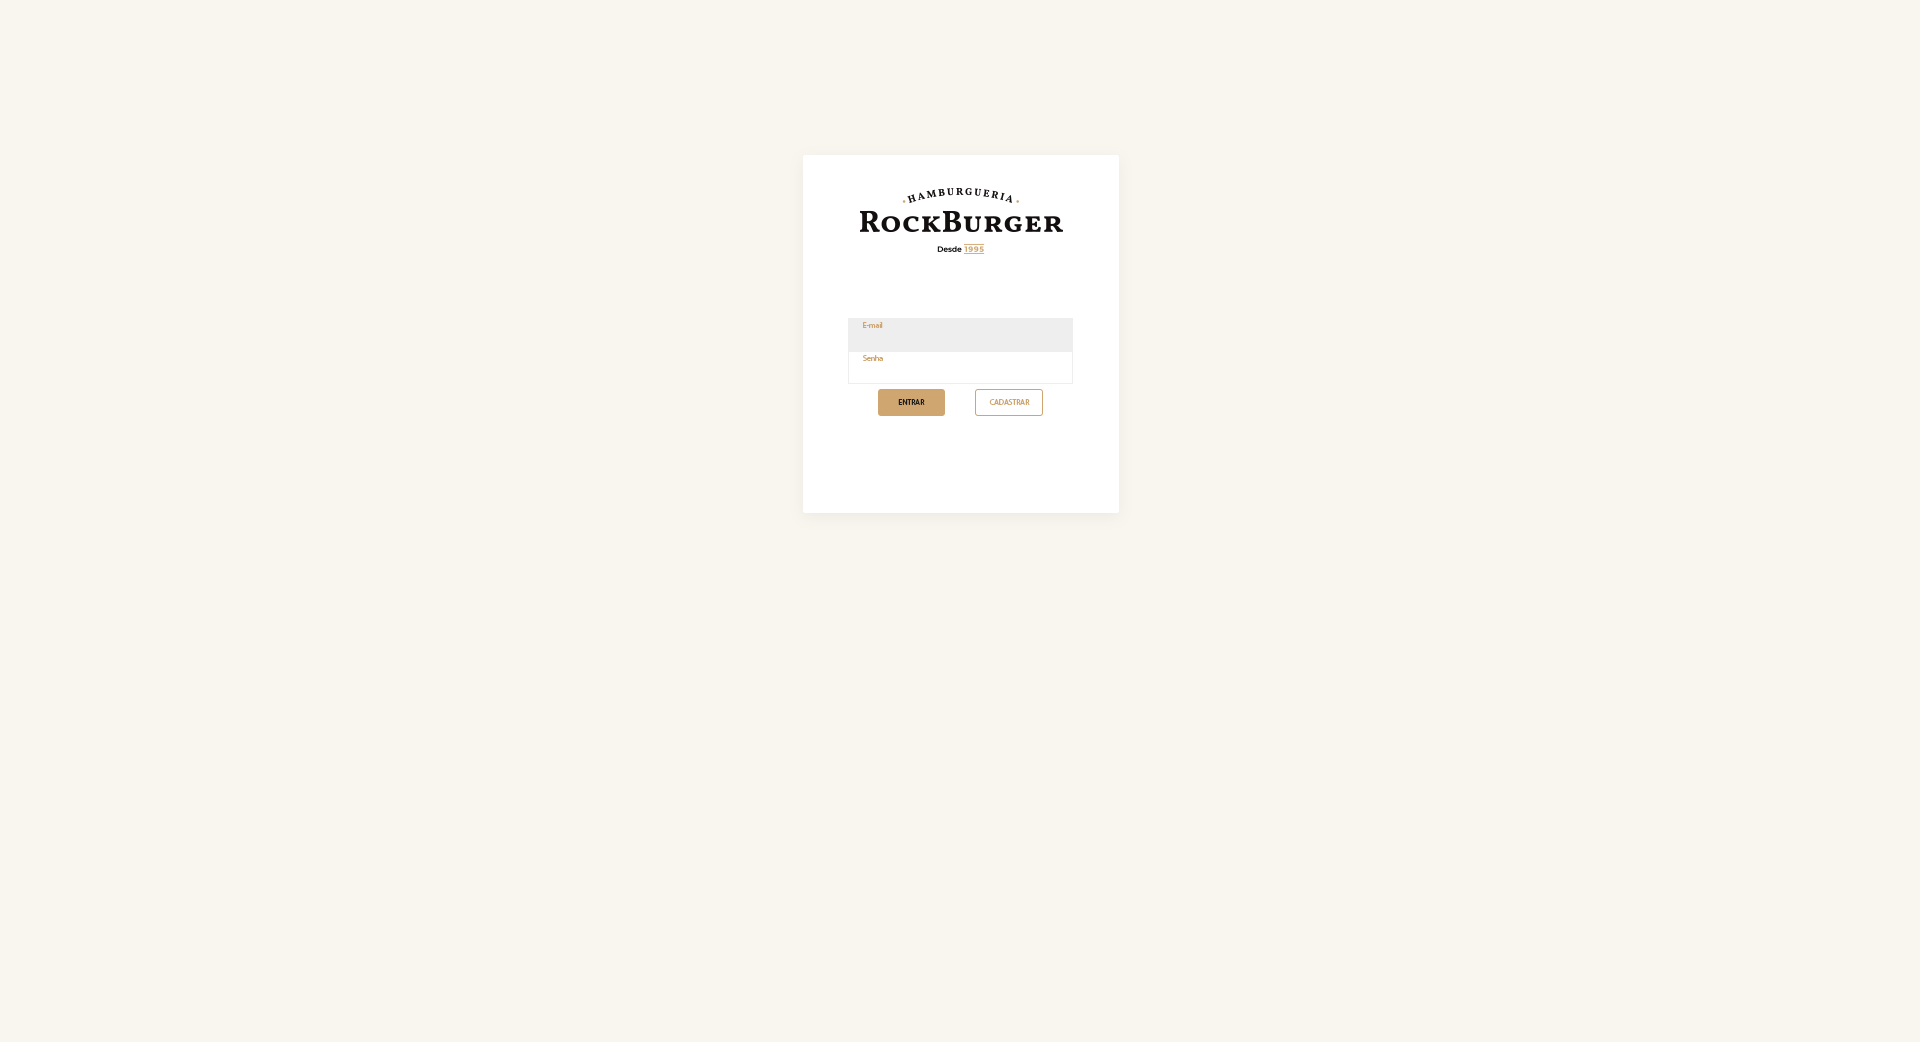
<style>
.page{position:relative;width:1920px;height:1042px;background:#f9f5ef}
.page>*{position:absolute;margin:0}
.t1{font:8px "MyriadPro-Regular";letter-spacing:-0.02em;color:#cfa66f}
.t2{font:8px "MyriadPro-Regular";letter-spacing:-0.02em;color:#1d1d1c}
</style>
<div class="page">
<p class="t1" style="left:863px;top:322px;width:20px;height:6px">E-mail</p>
<p class="t1" style="left:863px;top:355px;width:20px;height:6px">Senha</p>
<p class="t2" style="left:898px;top:399px;width:27px;height:6px">ENTRAR</p>
<p class="t1" style="left:989px;top:399px;width:41px;height:6px">CADASTRAR</p>
</div>
